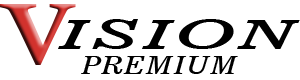
<style>
.page{position:relative;width:300px;height:80px;background:#ffffff}
.page>*{position:absolute;margin:0}
.t1{font:86.6px "CalisMTBol";scale:1.24 1}
.t2{font:40.5px "News701BT-ItalicA";color:#000000;scale:1.85 1}
.t3{font:24.5px "News701BT-ItalicA";color:#000000;scale:1.18 1}
</style>
<div class="page">
<p class="t1" style="left:0px;top:4px;width:76px;height:61px">V</p>
<p class="t2" style="left:58px;top:19px;width:242px;height:30px">ISION</p>
<p class="t3" style="left:81px;top:56px;width:157px;height:18px">PREMIUM</p>
</div>
